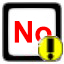
<style>
.page{position:relative;width:64px;height:64px;background:#ffffff}
.page>*{position:absolute;margin:0}
.t1{font:30px "Arial-BoldMT";color:#ff0000}
</style>
<div class="page">
<p class="t1" style="left:14px;top:21px;width:38px;height:22px">No</p>
</div>
